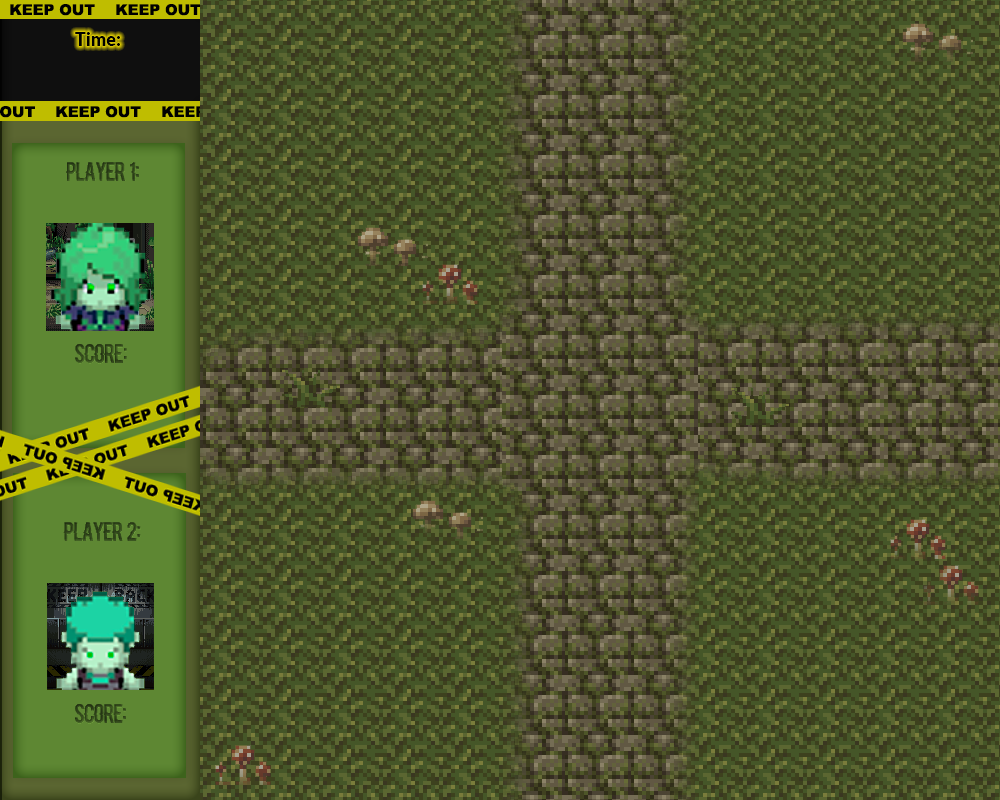
<style>
.page{position:relative;width:1000px;height:800px}
.page>*{position:absolute;margin:0}
.t1{font:18px "Lato-Black";color:#000000}
.t2{font:18px "Blacklisted";color:#31471b}
.t3{font:18px "Blacklisted";color:#33491c}
.t4{font:18px "Blacklisted";color:#334a1c}
</style>
<div class="page">
<p class="t1" style="left:75px;top:32px;width:45px;height:14px">Time:</p>
<p class="t2" style="left:66px;top:162px;width:73px;height:19px">Player 1:</p>
<p class="t3" style="left:75px;top:344px;width:52px;height:20px">Score:</p>
<p class="t4" style="left:63px;top:522px;width:78px;height:19px">Player 2:</p>
<p class="t3" style="left:75px;top:704px;width:51px;height:20px">Score:</p>
</div>
